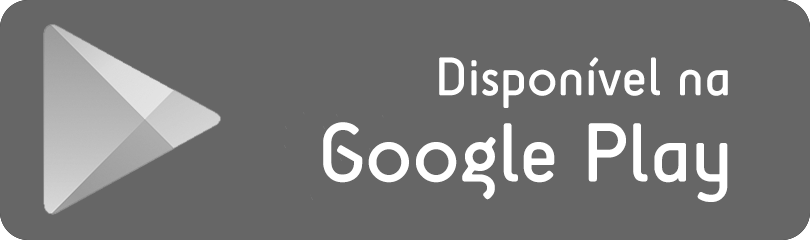
<style>
.page{position:relative;width:810px;height:240px;background:#666666}
.page>*{position:absolute;margin:0}
.t1{font:55.5px "SciFly-Sans";color:#ffffff}
.t2{font:85.8px "SciFly-Sans";color:#ffffff}
</style>
<div class="page">
<p class="t1" style="left:439px;top:57px;width:289px;height:51px">Disponível na</p>
<p class="t2" style="left:323px;top:122px;width:405px;height:80px">Google Play</p>
</div>
